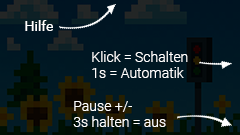
<style>
.page{position:relative;width:240px;height:135px}
.page>*{position:absolute;margin:0}
.t1{font:14px "Roboto-Regular";color:#ffffff}
.t2{font:14px "Roboto-Light";color:#ffffff}
</style>
<div class="page">
<p class="t1" style="left:25px;top:20px;width:28px;height:11px">Hilfe</p>
<p class="t2" style="left:92px;top:51px;width:96px;height:27px">Klick = Schalten<br>1s = Automatik</p>
<p class="t2" style="left:73px;top:101px;width:93px;height:26px">Pause +/- <br>3s halten = aus</p>
</div>
